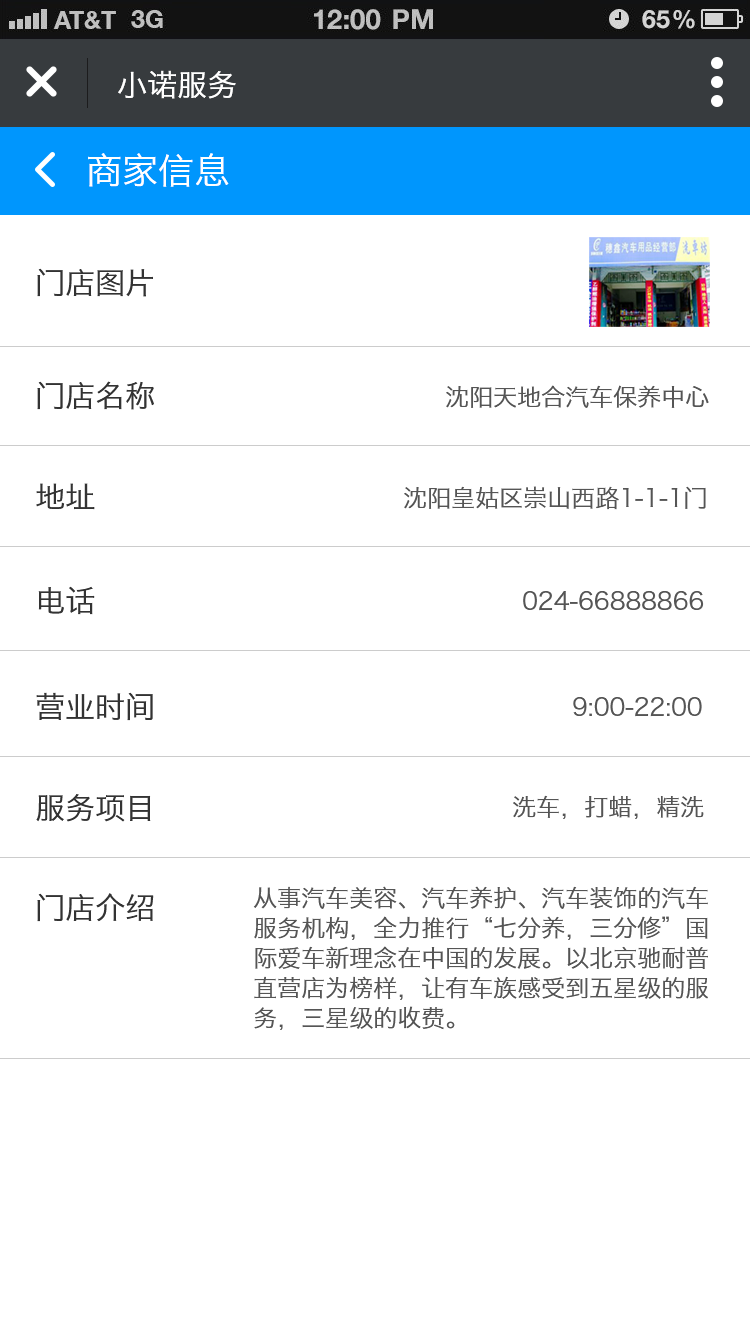
<style>
.page{position:relative;width:750px;height:1334px;background:#ffffff}
.page>*{position:absolute;margin:0}
.t1{font:30px "HiraginoSansGB-W3";color:#ffffff}
.t2{font:36px "HiraginoSansGB-W3";color:#ffffff}
.t3{font:30px "HiraginoSansGB-W3";color:#333333}
.t4{font:24px "HiraginoSansGB-W3";color:#555555}
.t5{font:24px/30px "HiraginoSansGB-W3";color:#555555}
</style>
<div class="page">
<p class="t1" style="left:118px;top:70px;width:118px;height:29px">小诺服务</p>
<p class="t2" style="left:88px;top:153px;width:141px;height:34px">商家信息</p>
<p class="t3" style="left:37px;top:268px;width:116px;height:29px">门店图片</p>
<p class="t3" style="left:37px;top:381px;width:117px;height:29px">门店名称</p>
<p class="t4" style="left:446px;top:385px;width:263px;height:23px">沈阳天地合汽车保养中心</p>
<p class="t3" style="left:36px;top:483px;width:59px;height:27px">地址</p>
<p class="t4" style="left:404px;top:486px;width:302px;height:24px">沈阳皇姑区崇山西路1-1-1门</p>
<p class="t3" style="left:38px;top:586px;width:57px;height:29px">电话</p>
<p class="t4" style="left:523px;top:591px;width:181px;height:20px">024-66888866</p>
<p class="t3" style="left:36px;top:692px;width:117px;height:29px">营业时间</p>
<p class="t4" style="left:573px;top:697px;width:129px;height:20px">9:00-22:00</p>
<p class="t3" style="left:36px;top:794px;width:115px;height:28px">服务项目</p>
<p class="t4" style="left:513px;top:795px;width:191px;height:24px">洗车，打蜡，精洗</p>
<p class="t3" style="left:37px;top:893px;width:117px;height:29px">门店介绍</p>
<p class="t5" style="left:253px;top:886px;width:455px;height:144px">从事汽车美容、汽车养护、汽车装饰的汽车<br>服务机构，全力推行“七分养，三分修”国<br>际爱车新理念在中国的发展。以北京驰耐普<br>直营店为榜样，让有车族感受到五星级的服<br>务，三星级的收费。</p>
</div>
